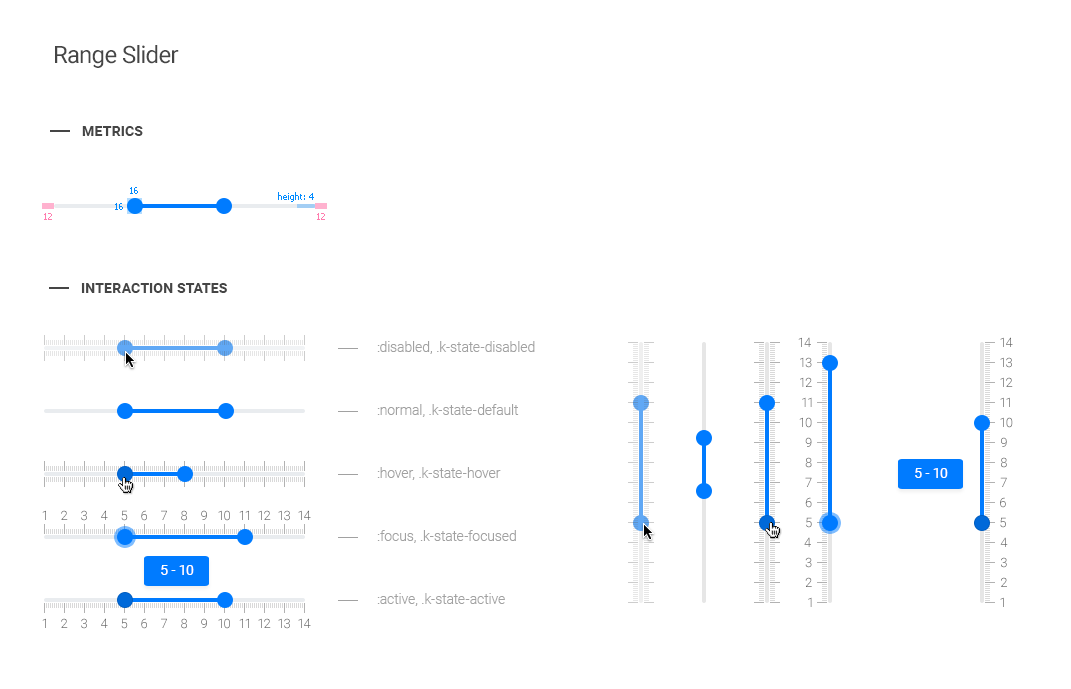
<style>
.page{position:relative;width:1071px;height:689px;background:#ffffff}
.page>*{position:absolute;margin:0}
.t1{font:24px "Roboto-Regular";letter-spacing:-0.025em;color:#454545}
.t2{font:14px "Roboto-Bold";letter-spacing:0.01em;color:#454545;text-transform:uppercase}
.t3{font:9px "Tahoma";color:#008aff}
.t4{font:9px "Tahoma";color:#ff7cae}
.t5{font:14px/63px "Roboto-Light";color:#a1a1a1}
.t6{font:13px "Roboto-Light"}
.t7{font:13px "Roboto-Light";color:#656565}
.t8{font:14px "Roboto-Regular";color:#ffffff}
</style>
<div class="page">
<p class="t1" style="left:55px;top:45px;width:124px;height:23px">Range Slider</p>
<p class="t2" style="left:82px;top:126px;width:61px;height:10px">Metrics</p>
<p class="t3" style="left:130px;top:187px;width:8px;height:7px">16</p>
<p class="t3" style="left:278px;top:192px;width:36px;height:10px">height: 4</p>
<p class="t3" style="left:115px;top:203px;width:8px;height:7px">16</p>
<p class="t4" style="left:44px;top:213px;width:8px;height:7px">12</p>
<p class="t4" style="left:317px;top:213px;width:8px;height:7px">12</p>
<p class="t2" style="left:81px;top:283px;width:146px;height:10px">Interaction states</p>
<p class="t5" style="left:377px;top:341px;width:158px;height:265px">:disabled, .k-state-disabled<br>:normal, .k-state-default<br>:hover, .k-state-hover<br>:focus, .k-state-focused<br>:active, .k-state-active</p>
<p class="t6" style="left:798px;top:337px;width:13px;height:10px">14</p>
<p class="t7" style="left:1000px;top:337px;width:13px;height:10px">14</p>
<p class="t6" style="left:800px;top:357px;width:12px;height:11px">13</p>
<p class="t6" style="left:1000px;top:357px;width:12px;height:11px">13</p>
<p class="t7" style="left:800px;top:377px;width:12px;height:10px">12</p>
<p class="t6" style="left:1000px;top:377px;width:13px;height:10px">12</p>
<p class="t6" style="left:802px;top:397px;width:10px;height:10px">11</p>
<p class="t6" style="left:1000px;top:397px;width:10px;height:10px">11</p>
<p class="t7" style="left:799px;top:417px;width:13px;height:11px">10</p>
<p class="t6" style="left:1000px;top:417px;width:13px;height:11px">10</p>
<p class="t6" style="left:805px;top:437px;width:7px;height:10px">9</p>
<p class="t6" style="left:1001px;top:437px;width:6px;height:10px">9</p>
<p class="t6" style="left:805px;top:457px;width:7px;height:11px">8</p>
<p class="t6" style="left:1001px;top:457px;width:6px;height:11px">8</p>
<p class="t8" style="left:915px;top:468px;width:33px;height:10px">5 - 10</p>
<p class="t6" style="left:805px;top:477px;width:7px;height:10px">7</p>
<p class="t6" style="left:1000px;top:477px;width:7px;height:10px">7</p>
<p class="t7" style="left:805px;top:497px;width:7px;height:11px">6</p>
<p class="t7" style="left:1000px;top:497px;width:6px;height:11px">6</p>
<p class="t7" style="left:42px;top:510px;width:4px;height:10px">1</p>
<p class="t6" style="left:61px;top:510px;width:7px;height:10px">2</p>
<p class="t6" style="left:81px;top:510px;width:6px;height:11px">3</p>
<p class="t7" style="left:101px;top:510px;width:7px;height:10px">4</p>
<p class="t6" style="left:121px;top:510px;width:7px;height:11px">5</p>
<p class="t6" style="left:141px;top:510px;width:6px;height:11px">6</p>
<p class="t6" style="left:161px;top:510px;width:6px;height:10px">7</p>
<p class="t6" style="left:181px;top:510px;width:6px;height:11px">8</p>
<p class="t6" style="left:201px;top:510px;width:6px;height:10px">9</p>
<p class="t6" style="left:218px;top:510px;width:12px;height:11px">10</p>
<p class="t7" style="left:239px;top:510px;width:10px;height:10px">11</p>
<p class="t6" style="left:258px;top:510px;width:13px;height:10px">12</p>
<p class="t6" style="left:278px;top:510px;width:12px;height:11px">13</p>
<p class="t7" style="left:298px;top:510px;width:13px;height:10px">14</p>
<p class="t6" style="left:806px;top:517px;width:6px;height:11px">5</p>
<p class="t6" style="left:1000px;top:517px;width:6px;height:11px">5</p>
<p class="t6" style="left:804px;top:537px;width:7px;height:10px">4</p>
<p class="t7" style="left:1000px;top:537px;width:8px;height:10px">4</p>
<p class="t6" style="left:805px;top:557px;width:7px;height:11px">3</p>
<p class="t6" style="left:1001px;top:557px;width:6px;height:11px">3</p>
<p class="t8" style="left:161px;top:565px;width:33px;height:10px">5 - 10</p>
<p class="t7" style="left:805px;top:577px;width:7px;height:10px">2</p>
<p class="t6" style="left:1001px;top:577px;width:6px;height:10px">2</p>
<p class="t6" style="left:808px;top:597px;width:4px;height:10px">1</p>
<p class="t6" style="left:1000px;top:597px;width:4px;height:10px">1</p>
<p class="t7" style="left:42px;top:618px;width:4px;height:10px">1</p>
<p class="t6" style="left:61px;top:618px;width:7px;height:10px">2</p>
<p class="t6" style="left:81px;top:618px;width:6px;height:11px">3</p>
<p class="t7" style="left:101px;top:618px;width:7px;height:10px">4</p>
<p class="t6" style="left:121px;top:618px;width:7px;height:11px">5</p>
<p class="t6" style="left:141px;top:618px;width:6px;height:11px">6</p>
<p class="t6" style="left:161px;top:618px;width:6px;height:10px">7</p>
<p class="t6" style="left:181px;top:618px;width:6px;height:11px">8</p>
<p class="t6" style="left:201px;top:618px;width:6px;height:10px">9</p>
<p class="t6" style="left:218px;top:618px;width:12px;height:11px">10</p>
<p class="t7" style="left:239px;top:618px;width:10px;height:10px">11</p>
<p class="t6" style="left:258px;top:618px;width:13px;height:10px">12</p>
<p class="t6" style="left:278px;top:618px;width:12px;height:11px">13</p>
<p class="t7" style="left:298px;top:618px;width:13px;height:10px">14</p>
</div>
